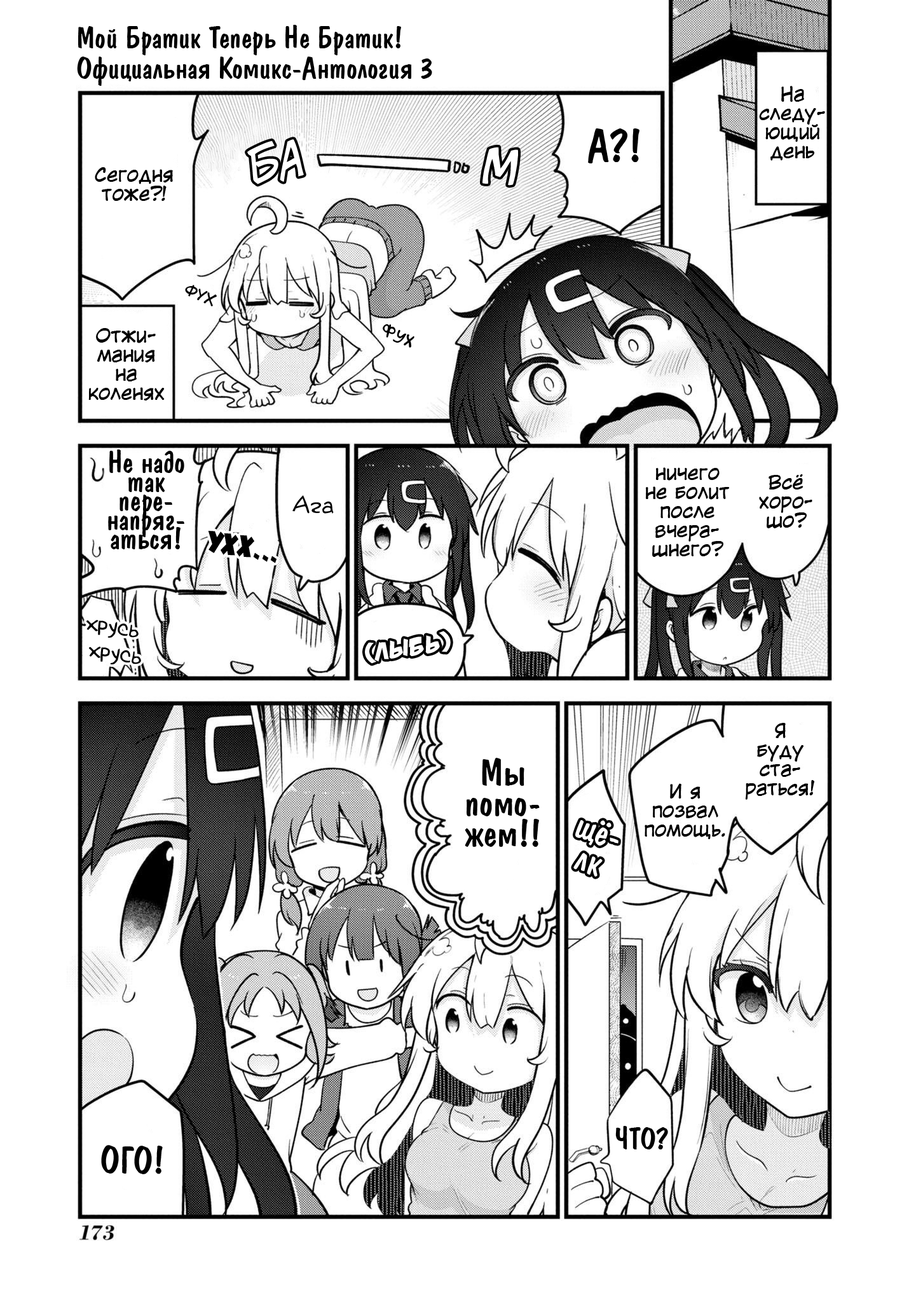
<style>
.page{position:relative;width:916px;height:1302px;background:#ffffff}
.page>*{position:absolute;margin:0}
.t1{font:30.5px/30.5px "ADomIno";color:#000000}
.t2{font:19.1px/19.1px "KuraiVoice2";color:#000000}
.t3{font:45.8px "ADomIno";color:#000000}
.t4{font:45.8px "v_CCJeffCampbell";color:#ffffff}
.t5{font:15.3px "KuraiVoice2";color:#000000}
.t6{font:15.3px "AkbarPlain";color:#000000}
.t7{font:30.5px/19.1px "ADomIno";color:#000000}
.t8{font:22.9px "v_Augie";color:#000000}
.t9{font:30.5px "v_DamnNoisyKids";color:#000000}
.t10{font:25.4px "v_DamnNoisyKids";color:#ffffff}
.t11{font:38.1px/30.5px "ADomIno";color:#000000}
.t12{font:38.1px/19.1px "ADomIno";color:#ffffff}
.t13{font:38.1px/30.5px "ADomIno";color:#ffffff}
.t14{font:30.5px "ADomIno";color:#000000}
.t15{font:38.1px "ADomIno";color:#000000}
</style>
<div class="page">
<p class="t1" style="left:77px;top:25px;width:355px;height:61px">Мой Братик Теперь Не Братик!<br>Официальная Комикс-Антология 3</p>
<p class="t2" style="left:759px;top:86px;width:66px;height:75px;text-align:center">На<br>следу-<br>ющий<br>день</p>
<p class="t3" style="left:588px;top:128px;width:51px;height:35px">А?!</p>
<p class="t4" style="left:247px;top:139px;width:57px;height:45px;rotate:-6deg">БА</p>
<p class="t4" style="left:482px;top:147px;width:36px;height:39px;rotate:10deg">м</p>
<p class="t2" style="left:95px;top:167px;width:78px;height:34px;text-align:center">Сегодня тоже?!</p>
<p class="t5" style="left:185px;top:285px;width:32px;height:21px;rotate:23deg">ФУХ</p>
<p class="t2" style="left:88px;top:328px;width:77px;height:72px;text-align:center">Отжи-<br>мания<br>на<br>коленях</p>
<p class="t6" style="left:383px;top:324px;width:31px;height:24px;rotate:23deg">ФУХ</p>
<p class="t7" style="left:108px;top:449px;width:76px;height:100px;text-align:center">Не надо<br>так<br>пере-<br>напряг-<br>аться!</p>
<p class="t2" style="left:645px;top:467px;width:85px;height:90px;text-align:center">ничего<br>не болит<br>после<br>вчера-<br>шнего?</p>
<p class="t2" style="left:759px;top:474px;width:53px;height:54px;text-align:center">Всё<br>хоро-<br>шо?</p>
<p class="t8" style="left:292px;top:495px;width:42px;height:19px;rotate:2deg">Ага</p>
<p class="t9" style="left:208px;top:531px;width:69px;height:32px;rotate:9deg">Ухх...</p>
<p class="t8" style="left:86px;top:620px;width:53px;height:18px;rotate:8deg">хрусь</p>
<p class="t10" style="left:365px;top:631px;width:86px;height:33px;rotate:-9deg">(лыбь)</p>
<p class="t8" style="left:89px;top:646px;width:52px;height:18px;rotate:8deg">хрусь</p>
<p class="t2" style="left:745px;top:723px;width:70px;height:77px;text-align:center">Я<br>буду<br>ста-<br>раться!</p>
<p class="t11" style="left:465px;top:758px;width:75px;height:89px;text-align:center">Мы<br>помо-<br>жем!!</p>
<p class="t2" style="left:645px;top:783px;width:80px;height:56px;text-align:center">И я позвал помощь.</p>
<p class="t12" style="left:573px;top:820px;width:45px;height:57px;text-align:center;rotate:19deg">щё-<br><span class="t13">лк</span></p>
<p class="t14" style="left:615px;top:1126px;width:53px;height:23px">ЧТО?</p>
<p class="t15" style="left:101px;top:1145px;width:62px;height:29px;rotate:1deg">ОГО!</p>
</div>
